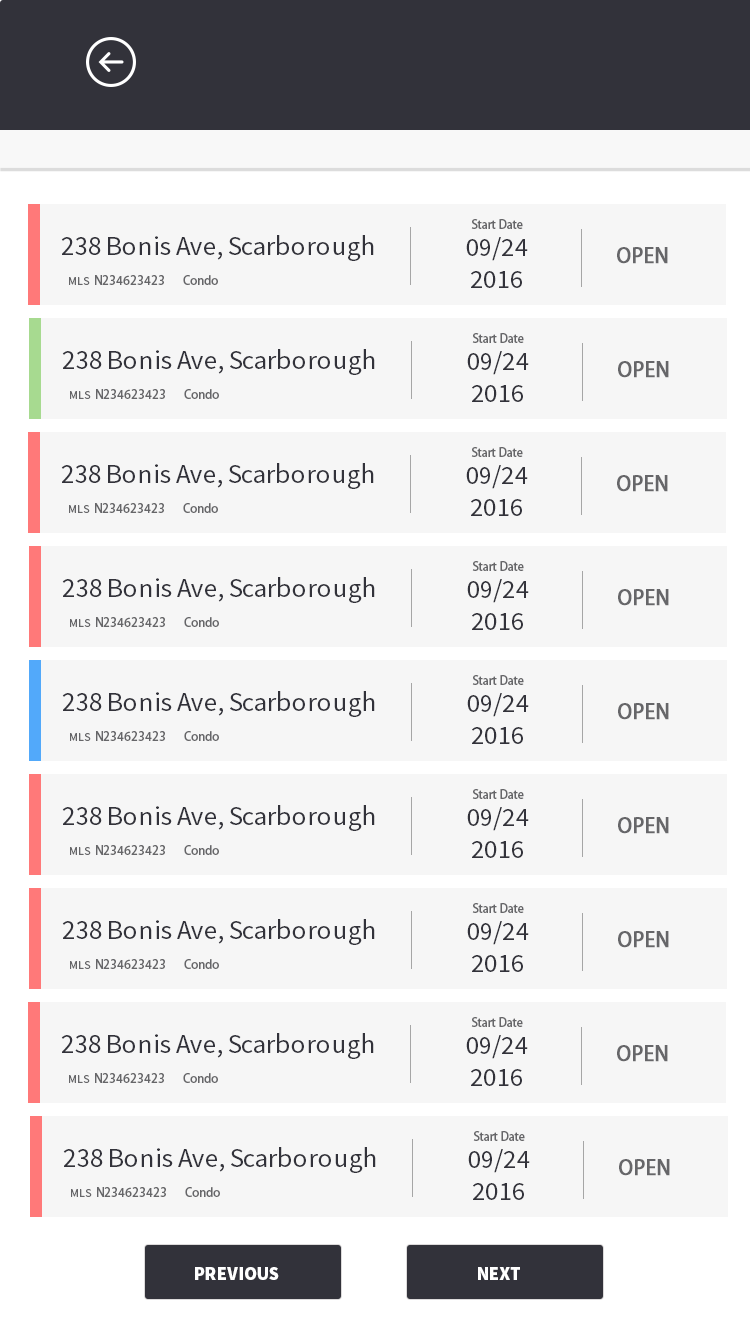
<style>
.page{position:relative;width:750px;height:1334px;background:#f6f6f6}
.page>*{position:absolute;margin:0}
.t1{font:12px "MyriadPro-Regular";color:#666669}
.t2{font:27px "SourceSansPro-Regular";color:#32323a}
.t3{font:26.7px "SourceSansPro-Regular";color:#32323a}
.t4{font:20px "AdobeHeitiStd-Regular";color:#666669;font-weight:bold}
.t5{font:12px "AdobeHeitiStd-Regular";color:#666669}
.t6{font:12px "SourceSansPro-Regular";color:#666669}
.t7{font:18.5px "SourceSansPro-Black";color:#ffffff}
</style>
<div class="page">
<p class="t1" style="left:471px;top:219px;width:52px;height:10px">Start Date</p>
<p class="t2" style="left:61px;top:235px;width:313px;height:26px">238 Bonis Ave, Scarborough</p>
<p class="t3" style="left:466px;top:237px;width:62px;height:51px;text-align:center">09/24<br>2016</p>
<p class="t4" style="left:617px;top:247px;width:51px;height:17px">OPEN</p>
<p class="t5" style="left:69px;top:275px;width:149px;height:10px"><span class="t6">MLS </span> N234623423      Condo</p>
<p class="t1" style="left:472px;top:333px;width:52px;height:10px">Start Date</p>
<p class="t2" style="left:62px;top:349px;width:313px;height:26px">238 Bonis Ave, Scarborough</p>
<p class="t3" style="left:467px;top:351px;width:62px;height:51px;text-align:center">09/24<br>2016</p>
<p class="t4" style="left:618px;top:361px;width:51px;height:17px">OPEN</p>
<p class="t5" style="left:70px;top:389px;width:149px;height:10px"><span class="t6">MLS </span> N234623423      Condo</p>
<p class="t1" style="left:471px;top:447px;width:52px;height:10px">Start Date</p>
<p class="t2" style="left:61px;top:463px;width:313px;height:26px">238 Bonis Ave, Scarborough</p>
<p class="t3" style="left:466px;top:465px;width:62px;height:51px;text-align:center">09/24<br>2016</p>
<p class="t4" style="left:617px;top:475px;width:51px;height:17px">OPEN</p>
<p class="t5" style="left:69px;top:503px;width:149px;height:10px"><span class="t6">MLS </span> N234623423      Condo</p>
<p class="t1" style="left:472px;top:561px;width:52px;height:10px">Start Date</p>
<p class="t2" style="left:62px;top:577px;width:313px;height:26px">238 Bonis Ave, Scarborough</p>
<p class="t3" style="left:467px;top:579px;width:62px;height:51px;text-align:center">09/24<br>2016</p>
<p class="t4" style="left:618px;top:589px;width:51px;height:17px">OPEN</p>
<p class="t5" style="left:70px;top:617px;width:149px;height:10px"><span class="t6">MLS </span> N234623423      Condo</p>
<p class="t1" style="left:472px;top:675px;width:52px;height:10px">Start Date</p>
<p class="t2" style="left:62px;top:691px;width:313px;height:26px">238 Bonis Ave, Scarborough</p>
<p class="t3" style="left:467px;top:693px;width:62px;height:51px;text-align:center">09/24<br>2016</p>
<p class="t4" style="left:618px;top:703px;width:51px;height:17px">OPEN</p>
<p class="t5" style="left:70px;top:731px;width:149px;height:10px"><span class="t6">MLS </span> N234623423      Condo</p>
<p class="t1" style="left:472px;top:789px;width:52px;height:10px">Start Date</p>
<p class="t2" style="left:62px;top:805px;width:313px;height:26px">238 Bonis Ave, Scarborough</p>
<p class="t3" style="left:467px;top:807px;width:62px;height:51px;text-align:center">09/24<br>2016</p>
<p class="t4" style="left:618px;top:817px;width:51px;height:17px">OPEN</p>
<p class="t5" style="left:70px;top:845px;width:149px;height:10px"><span class="t6">MLS </span> N234623423      Condo</p>
<p class="t1" style="left:472px;top:903px;width:52px;height:10px">Start Date</p>
<p class="t2" style="left:62px;top:919px;width:313px;height:26px">238 Bonis Ave, Scarborough</p>
<p class="t3" style="left:467px;top:921px;width:62px;height:51px;text-align:center">09/24<br>2016</p>
<p class="t4" style="left:618px;top:931px;width:51px;height:17px">OPEN</p>
<p class="t5" style="left:70px;top:959px;width:149px;height:10px"><span class="t6">MLS </span> N234623423      Condo</p>
<p class="t1" style="left:471px;top:1017px;width:52px;height:10px">Start Date</p>
<p class="t2" style="left:61px;top:1033px;width:313px;height:26px">238 Bonis Ave, Scarborough</p>
<p class="t3" style="left:466px;top:1035px;width:62px;height:51px;text-align:center">09/24<br>2016</p>
<p class="t4" style="left:617px;top:1045px;width:51px;height:17px">OPEN</p>
<p class="t5" style="left:69px;top:1073px;width:149px;height:10px"><span class="t6">MLS </span> N234623423      Condo</p>
<p class="t1" style="left:473px;top:1131px;width:52px;height:10px">Start Date</p>
<p class="t2" style="left:63px;top:1147px;width:313px;height:26px">238 Bonis Ave, Scarborough</p>
<p class="t3" style="left:468px;top:1149px;width:62px;height:51px;text-align:center">09/24<br>2016</p>
<p class="t4" style="left:619px;top:1159px;width:51px;height:17px">OPEN</p>
<p class="t5" style="left:71px;top:1187px;width:149px;height:10px"><span class="t6">MLS </span> N234623423      Condo</p>
<p class="t7" style="left:195px;top:1267px;width:84px;height:13px">PREVIOUS</p>
<p class="t7" style="left:478px;top:1267px;width:42px;height:13px">NEXT</p>
</div>
